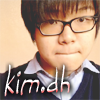
<style>
.page{position:relative;width:100px;height:100px}
.page>*{position:absolute;margin:0}
.t1{font:70px "Jellyka,-End_less-Voyage";color:#ffffff}
</style>
<div class="page">
<p class="t1" style="left:4px;top:64px;width:66px;height:33px">kim.dh</p>
</div>
